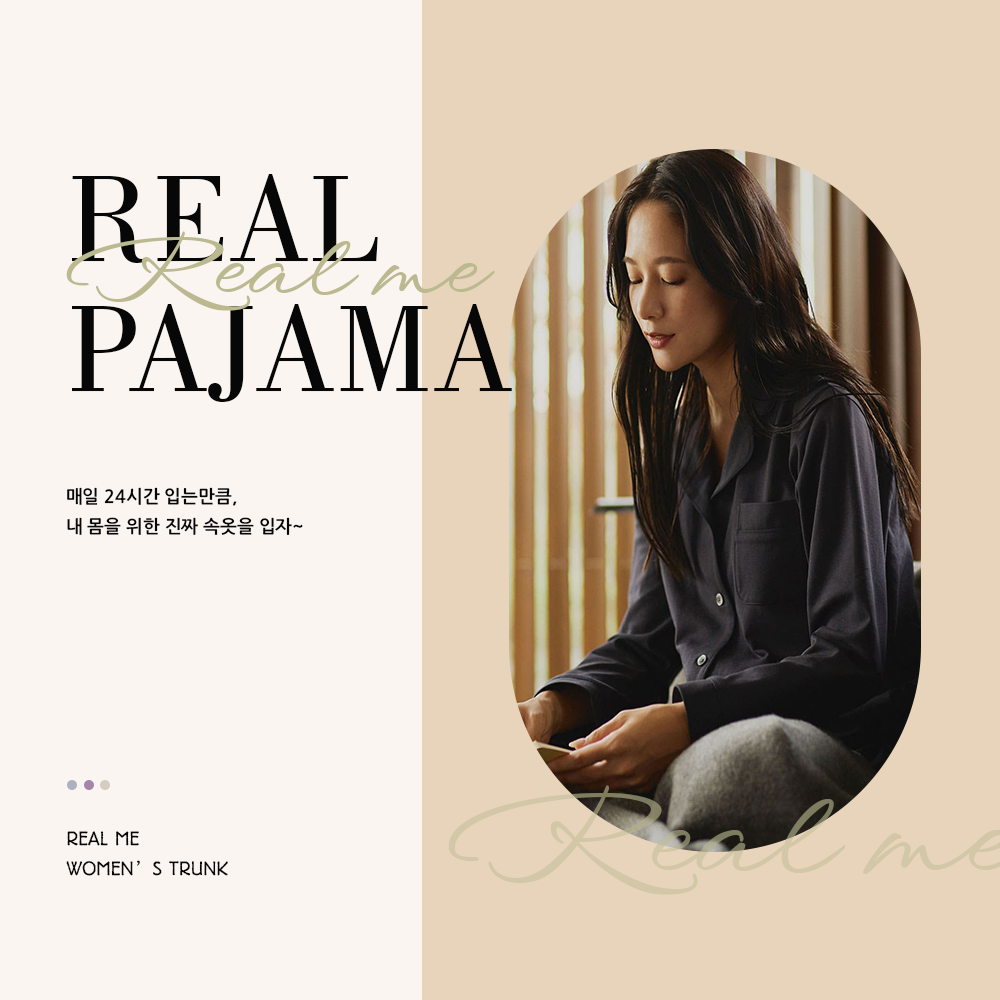
<style>
.page{position:relative;width:1000px;height:1000px;background:#faf5f1}
.page>*{position:absolute;margin:0}
.t1{font:128.4px/130.4px "Bodoni-BkBT";color:#070707;text-transform:uppercase}
.t2{font:17.9px/30px "NanumGothicOTFBold";color:#070707;text-transform:uppercase}
.t3{font:18.2px/30.6px "YJ-INJANG-Medium";color:#070707;text-transform:uppercase;font-weight:bold}
</style>
<div class="page">
<p class="t1" style="left:72px;top:174px;width:440px;height:228px">REAL<br>PAJAMA</p>
<p class="t2" style="left:67px;top:487px;width:236px;height:48px">매일 24시간 입는만큼,<br>내 몸을 위한 진짜 속옷을 입자~</p>
<p class="t3" style="left:66px;top:831px;width:162px;height:45px">REAL ME<br>WOMEN’S TRUNK</p>
</div>
